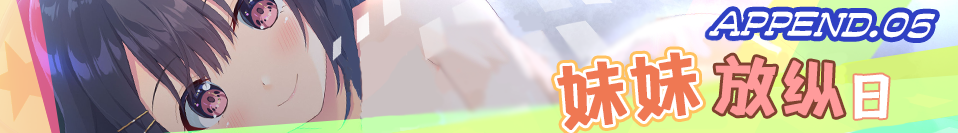
<style>
.page{position:relative;width:958px;height:133px}
.page>*{position:absolute;margin:0}
.t1{font:71.9px "shetumodengxiaofangti";color:#ef7853;text-transform:uppercase;font-weight:bold}
.t2{font:66.7px "shetumodengxiaofangti";color:#ff9b9b;text-transform:uppercase;font-weight:bold}
.t3{font:53.1px "shetumodengxiaofangti";letter-spacing:0.02em;color:#ffffff;text-transform:uppercase;font-weight:bold}
</style>
<div class="page">
<p class="t1" style="left:557px;top:52px;width:143px;height:78px;rotate:-7deg">妹妹</p>
<p class="t2" style="left:714px;top:55px;width:130px;height:62px;rotate:2deg">放纵</p>
<p class="t3" style="left:854px;top:74px;width:35px;height:45px;rotate:1deg">日</p>
</div>
